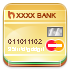
<style>
.page{position:relative;width:70px;height:70px}
.page>*{position:absolute;margin:0}
.t1{font:7px "ArialMT";color:#983002}
.t2{font:6px "ArialMT";color:#fffefe}
.t3{font:7px "ArialMT";color:#76483c}
</style>
<div class="page">
<p class="t1" style="left:16px;top:13px;width:40px;height:5px">XXXX BANK</p>
<p class="t2" style="left:8px;top:39px;width:36px;height:13px"><span class="t3">011011102<br></span>35trrfdfgddgrt</p>
</div>
